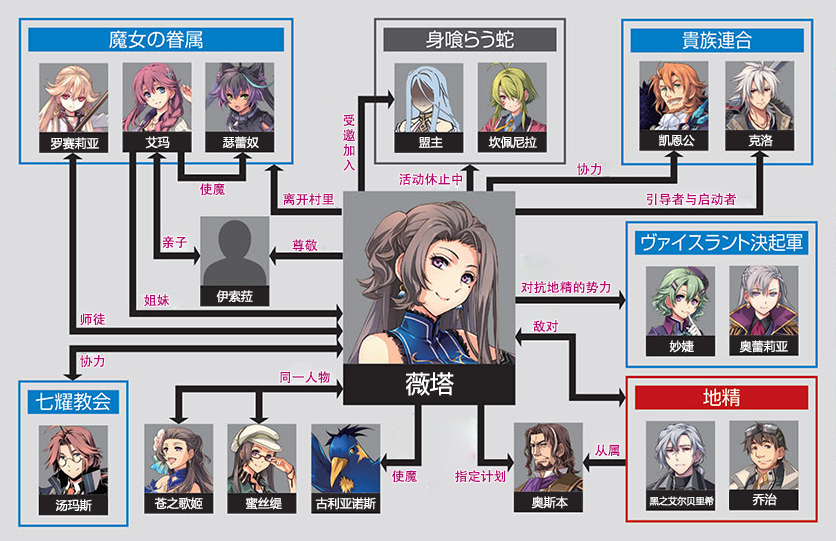
<style>
.page{position:relative;width:836px;height:541px;background:#dddddf}
.page>*{position:absolute;margin:0}
.t1{font:13px/15px "AdobeHeitiStd-Regular";color:#b70773}
.t2{font:12px "MicrosoftYaHei";color:#ffffff}
.t3{font:13px "AdobeHeitiStd-Regular";color:#b70773}
.t4{font:24px "MicrosoftYaHei";color:#ffffff}
.t5{font:9.2px "MicrosoftYaHei";color:#ffffff}
</style>
<div class="page">
<p class="t1" style="left:343px;top:114px;width:12px;height:57px">受<br>邀<br>加<br>入</p>
<p class="t2" style="left:50px;top:137px;width:49px;height:13px">罗赛莉亚</p>
<p class="t2" style="left:145px;top:136px;width:25px;height:13px">艾玛</p>
<p class="t2" style="left:222px;top:136px;width:37px;height:13px">瑟蕾奴</p>
<p class="t2" style="left:419px;top:136px;width:24px;height:12px">盟主</p>
<p class="t2" style="left:488px;top:136px;width:49px;height:13px">坎佩尼拉</p>
<p class="t2" style="left:659px;top:134px;width:36px;height:13px">凯恩公</p>
<p class="t2" style="left:748px;top:134px;width:25px;height:13px">克洛</p>
<p class="t3" style="left:399px;top:173px;width:64px;height:13px">活动休止中</p>
<p class="t3" style="left:577px;top:163px;width:25px;height:13px">协力</p>
<p class="t3" style="left:200px;top:183px;width:25px;height:13px">使魔</p>
<p class="t3" style="left:283px;top:193px;width:51px;height:13px">离开村里</p>
<p class="t3" style="left:646px;top:193px;width:90px;height:13px">引导者与启动者</p>
<p class="t3" style="left:162px;top:236px;width:25px;height:13px">亲子</p>
<p class="t3" style="left:292px;top:239px;width:26px;height:13px">尊敬</p>
<p class="t3" style="left:521px;top:281px;width:90px;height:13px">对抗地精的势力</p>
<p class="t3" style="left:144px;top:294px;width:26px;height:13px">姐妹</p>
<p class="t2" style="left:216px;top:290px;width:37px;height:13px">伊索菈</p>
<p class="t3" style="left:80px;top:313px;width:25px;height:13px">师徒</p>
<p class="t3" style="left:533px;top:320px;width:26px;height:13px">敌对</p>
<p class="t2" style="left:669px;top:340px;width:25px;height:13px">妙婕</p>
<p class="t2" style="left:739px;top:340px;width:49px;height:13px">奥蕾莉亚</p>
<p class="t3" style="left:80px;top:355px;width:25px;height:13px">协力</p>
<p class="t3" style="left:280px;top:371px;width:50px;height:13px">同一人物</p>
<p class="t4" style="left:406px;top:372px;width:48px;height:24px">薇塔</p>
<p class="t3" style="left:595px;top:444px;width:25px;height:13px">从属</p>
<p class="t3" style="left:392px;top:470px;width:25px;height:13px">使魔</p>
<p class="t3" style="left:455px;top:470px;width:51px;height:13px">指定计划</p>
<p class="t2" style="left:154px;top:497px;width:49px;height:13px">苍之歌姬</p>
<p class="t2" style="left:245px;top:497px;width:37px;height:13px">蜜丝缇</p>
<p class="t2" style="left:315px;top:497px;width:61px;height:13px">古利亚诺斯</p>
<p class="t2" style="left:531px;top:496px;width:37px;height:13px">奥斯本</p>
<p class="t5" style="left:649px;top:496px;width:65px;height:10px">黑之艾尔贝里希</p>
<p class="t2" style="left:752px;top:493px;width:25px;height:13px">乔治</p>
<p class="t2" style="left:55px;top:499px;width:37px;height:13px">汤玛斯</p>
</div>
